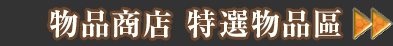
<style>
.page{position:relative;width:393px;height:46px;background:#333333}
.page>*{position:absolute;margin:0}
.t1{font:30px "RyuminPr6N-ExBold";letter-spacing:0.075em;color:#fffffa}
</style>
<div class="page">
<p class="t1" style="left:49px;top:9px;width:292px;height:29px">物品商店 特選物品區</p>
</div>
